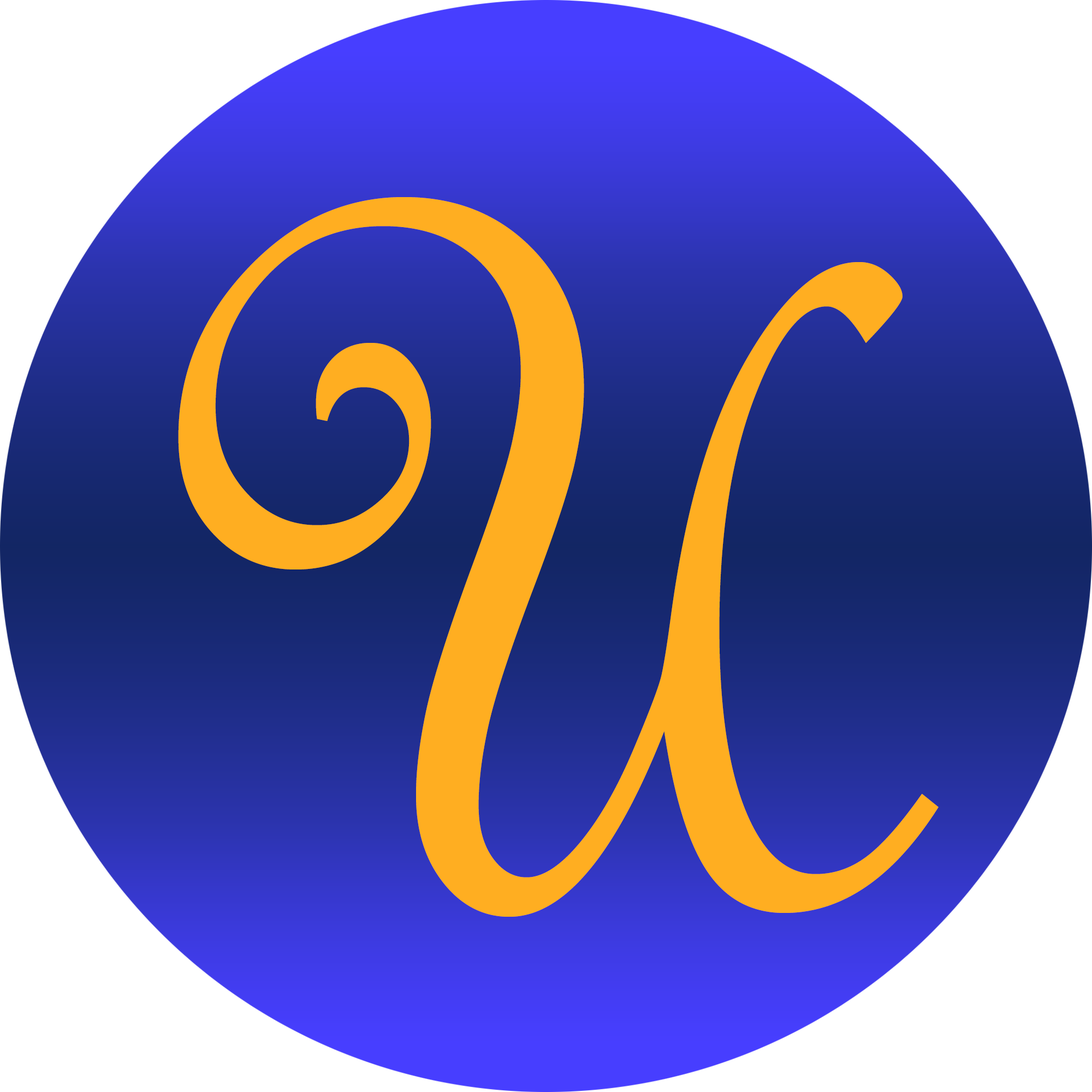
<style>
.page{position:relative;width:1092px;height:1092px;background:#ffffff}
.page>*{position:absolute;margin:0}
.t1{font:1084px "FrenchScriptMT";color:#ffae21}
</style>
<div class="page">
<p class="t1" style="left:178px;top:197px;width:761px;height:720px">U</p>
</div>
